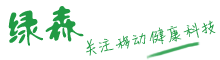
<style>
.page{position:relative;width:220px;height:60px;background:#ffffff}
.page>*{position:absolute;margin:0}
.t1{font:40px "FZLXTJW--GB1-0";letter-spacing:-0.005em;color:#219a44}
.t2{font:14px "SentyMaruko";letter-spacing:-0.005em;color:#219a44}
</style>
<div class="page">
<p class="t1" style="left:8px;top:6px;width:76px;height:40px;rotate:-6deg">绿森</p>
<p class="t2" style="left:86px;top:20px;width:130px;height:36px;rotate:-9deg">关注移动健康科技</p>
</div>
